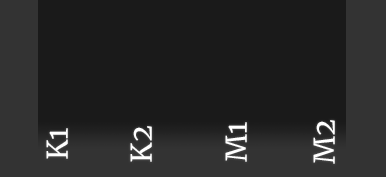
<style>
.page{position:relative;width:386px;height:177px;background:#1a1a1a}
.page>*{position:absolute;margin:0}
.t1{font:28.3px "Merriweather-Regular";color:#ffffff}
</style>
<div class="page">
<p class="t1" style="left:130px;top:126px;width:22px;height:36px;rotate:-90deg">K2</p>
<p class="t1" style="left:225px;top:122px;width:22px;height:40px;rotate:-90deg">M1</p>
<p class="t1" style="left:313px;top:120px;width:22px;height:44px;rotate:-90deg">M2</p>
<p class="t1" style="left:46px;top:128px;width:22px;height:31px;rotate:-90deg">K1</p>
</div>
